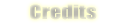
<style>
.page{position:relative;width:128px;height:24px;background:#ffffff}
.page>*{position:absolute;margin:0}
.t1{font:18px "Impact";color:#c8c7ba;scale:1.25 1}
</style>
<div class="page">
<p class="t1" style="left:30px;top:4px;width:67px;height:16px">Credits</p>
</div>
